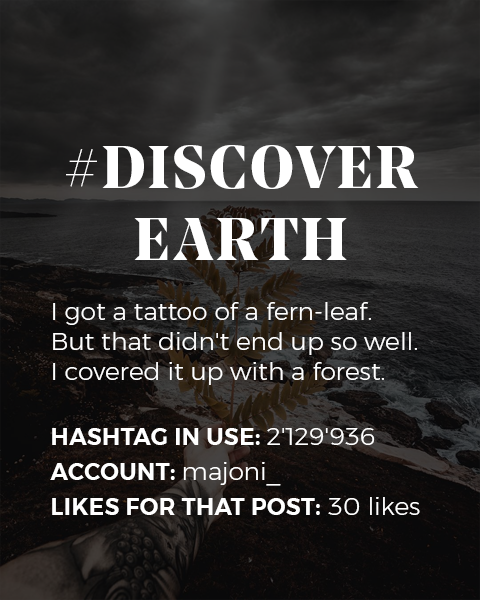
<style>
.page{position:relative;width:480px;height:600px}
.page>*{position:absolute;margin:0}
.t1{font:25px "Montserrat-Light";color:#ffffff}
.t2{font:60px "NoeDisplay-Bold";letter-spacing:0.05em;color:#ffffff;text-transform:uppercase}
.t3{font:23px/35px "Montserrat-SemiBold";letter-spacing:0.02em;color:#ffffff;text-transform:uppercase}
.t4{font:25px/35px "Montserrat-Light";color:#ffffff}
</style>
<div class="page">
<p class="t1" style="left:50px;top:145px;width:370px;height:370px;text-align:center"><span class="t2">#discover earth<br></span><br>I got a tattoo of a fern-leaf. <br>But that didn't end up so well. <br>I covered it up with a forest. <br><br><span class="t3">Hashtag in use: </span><span class="t4">2'129'936<br></span><span class="t3">Account: </span><span class="t4">majoni_<br></span><span class="t3">Likes for that post:</span><span class="t4"> 30 likes</span></p>
</div>
